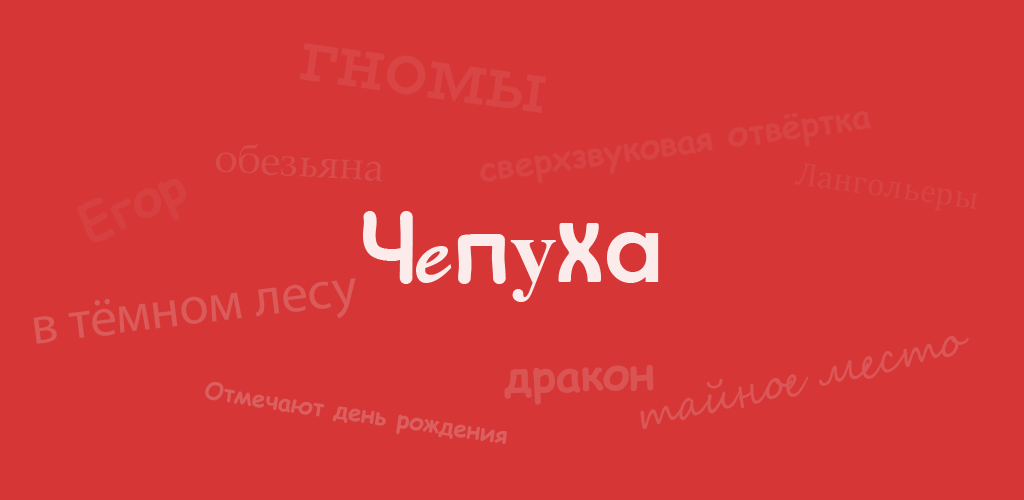
<style>
.page{position:relative;width:1024px;height:500px;background:#d63636}
.page>*{position:absolute;margin:0}
.t1{font:71.3px "RockwellNova";color:#d94444}
.t2{font:34.5px "ComicSansMS-Bold";color:#d84343}
.t3{font:41.1px "PalatinoLinotype-Roman";color:#d94c4c}
.t4{font:32.9px "CambriaMath";color:#d84343}
.t5{font:50px "ComicSansMS-Bold";color:#d74040}
.t6{font:92.6px "ComicSansMS-Bold";color:#ffffff}
.t7{font:92.6px "BrushScriptStd";color:#ffffff}
.t8{font:92.6px "TimesNewRomanPS-BoldMT";color:#ffffff}
.t9{font:92.6px "HoboStd";color:#ffffff}
.t10{font:92.6px "CenturyGothic-Bold";color:#ffffff}
.t11{font:53.6px "MyriadPro-Regular";color:#db5a5a}
.t12{font:41.1px "SegoeScript";color:#db5757}
.t13{font:45.3px "ComicSansMS-Bold";color:#da5454}
.t14{font:24px "ComicSansMS-Bold";color:#dc5f5f}
</style>
<div class="page">
<p class="t1" style="left:299px;top:43px;width:248px;height:70px;rotate:8deg">гномы</p>
<p class="t2" style="left:480px;top:111px;width:391px;height:73px;rotate:-8deg">сверхзвуковая отвёртка</p>
<p class="t3" style="left:216px;top:143px;width:166px;height:39px;rotate:3deg">обезьяна</p>
<p class="t4" style="left:794px;top:163px;width:184px;height:48px;rotate:8deg">Лангольеры</p>
<p class="t5" style="left:77px;top:178px;width:109px;height:65px;rotate:-24deg">Егор</p>
<p class="t6" style="left:362px;top:211px;width:297px;height:91px;opacity:0.9">Ч<span class="t7">e</span>п<span class="t8">у</span><span class="t9">x</span><span class="t10">а</span></p>
<p class="t11" style="left:33px;top:278px;width:323px;height:66px;rotate:-7deg">в тёмном лесу</p>
<p class="t12" style="left:640px;top:336px;width:329px;height:94px;rotate:-13deg">тайное место</p>
<p class="t13" style="left:504px;top:365px;width:150px;height:40px;rotate:-2deg">дракон</p>
<p class="t14" style="left:205px;top:382px;width:302px;height:62px;rotate:9deg">Отмечают день рождения</p>
</div>
